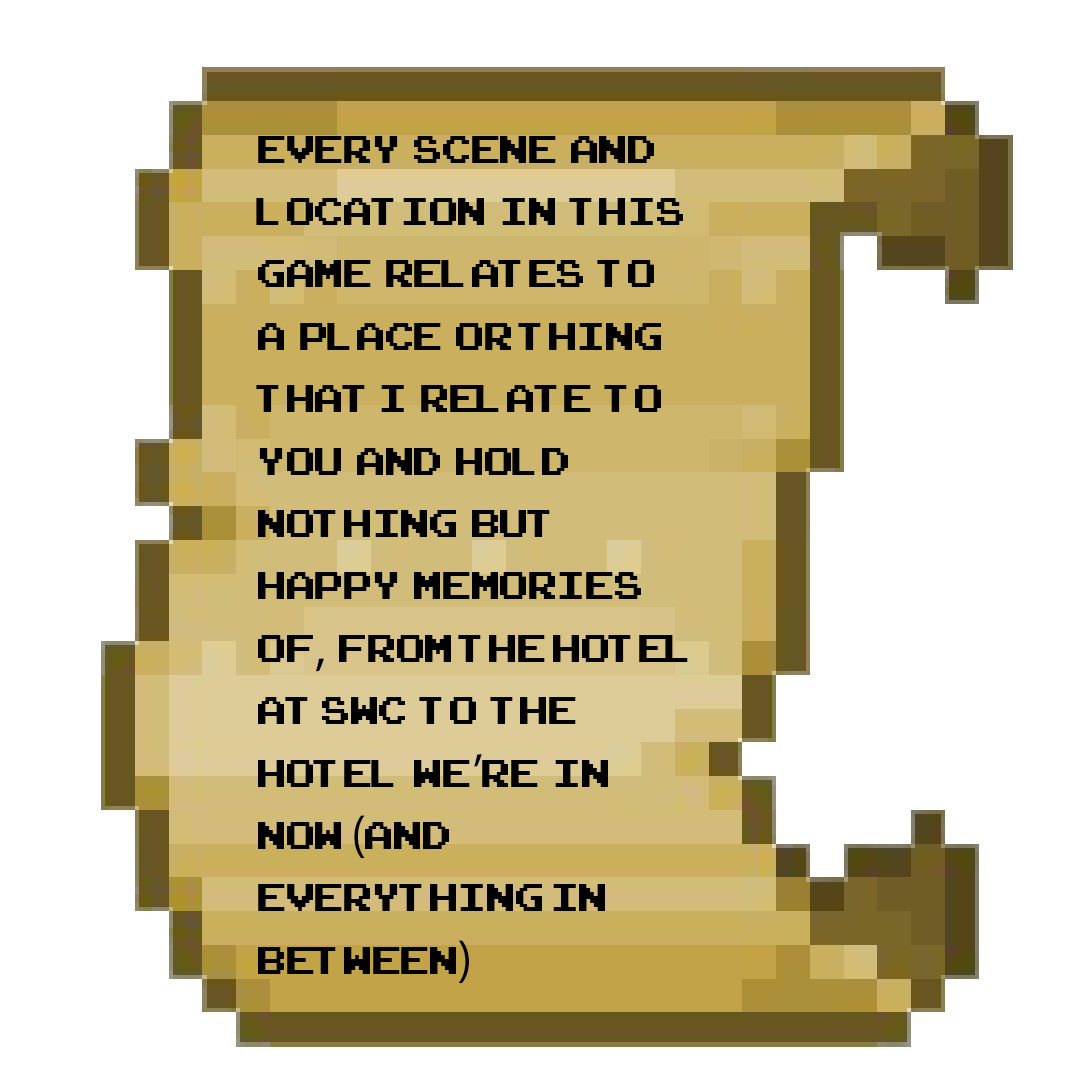
<style>
.page{position:relative;width:1080px;height:1080px;background:#ffffff}
.page>*{position:absolute;margin:0}
.t1{font:52px "ArcadeClassic";color:#000000}
.t2{font:52px "MyriadPro-Regular";color:#000000}
</style>
<div class="page">
<p class="t1" style="left:256px;top:136px;width:432px;height:847px">Every  scene  and  location  in  this  game  relates  to  a  place  or thing  that i  relate  to  you  and  hold nothing  but happy  memories  of<span class="t2">,</span>  from the hotel at SWC  to  the  hotel  we<span class="t2">’</span>re  in now <span class="t2">(</span>and everything in between<span class="t2">)</span></p>
</div>
